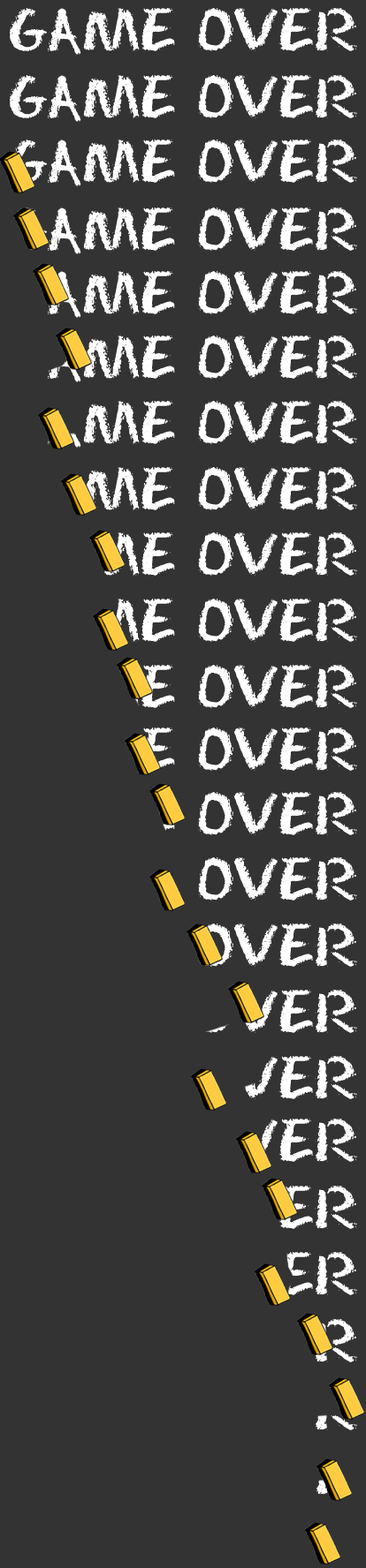
<style>
.page{position:relative;width:366px;height:1568px;background:#333333}
.page>*{position:absolute;margin:0}
.t1{font:53.6px "Eraser-Regular";color:#ffffff}
</style>
<div class="page">
<p class="t1" style="left:10px;top:8px;width:347px;height:47px">GAME OVER</p>
<p class="t1" style="left:10px;top:75px;width:347px;height:47px">GAME OVER</p>
</div>
